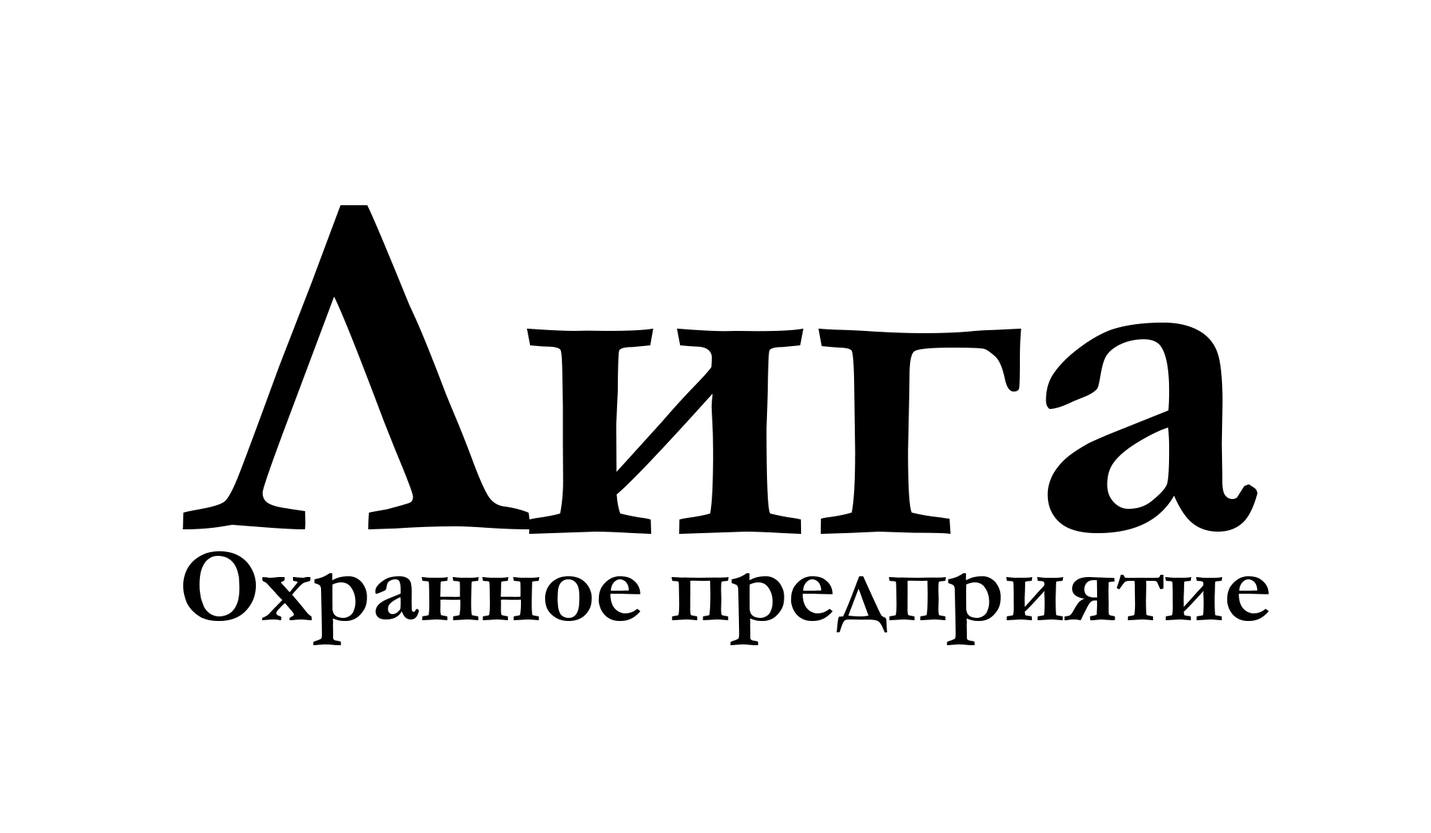
<style>
.page{position:relative;width:1431px;height:833px;background:#ffffff}
.page>*{position:absolute;margin:0}
.t1{font:104.1px "Garamond-Bold";color:#000000}
</style>
<div class="page">
<p class="t1" style="left:183px;top:551px;width:1086px;height:94px">Охранное предприятие</p>
</div>
